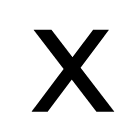
<style>
.page{position:relative;width:140px;height:140px;background:#ffffff}
.page>*{position:absolute;margin:0}
.t1{font:150px "Monaco";letter-spacing:-0.065em;color:#000000}
</style>
<div class="page">
<p class="t1" style="left:31px;top:29px;width:84px;height:83px">x</p>
</div>
